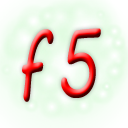
<style>
.page{position:relative;width:128px;height:128px}
.page>*{position:absolute;margin:0}
.t1{font:95.8px "MVBoli";letter-spacing:0.3em;font-weight:bold;scale:0.62 1}
</style>
<div class="page">
<p class="t1" style="left:22px;top:28px;width:79px;height:74px">f5</p>
</div>
